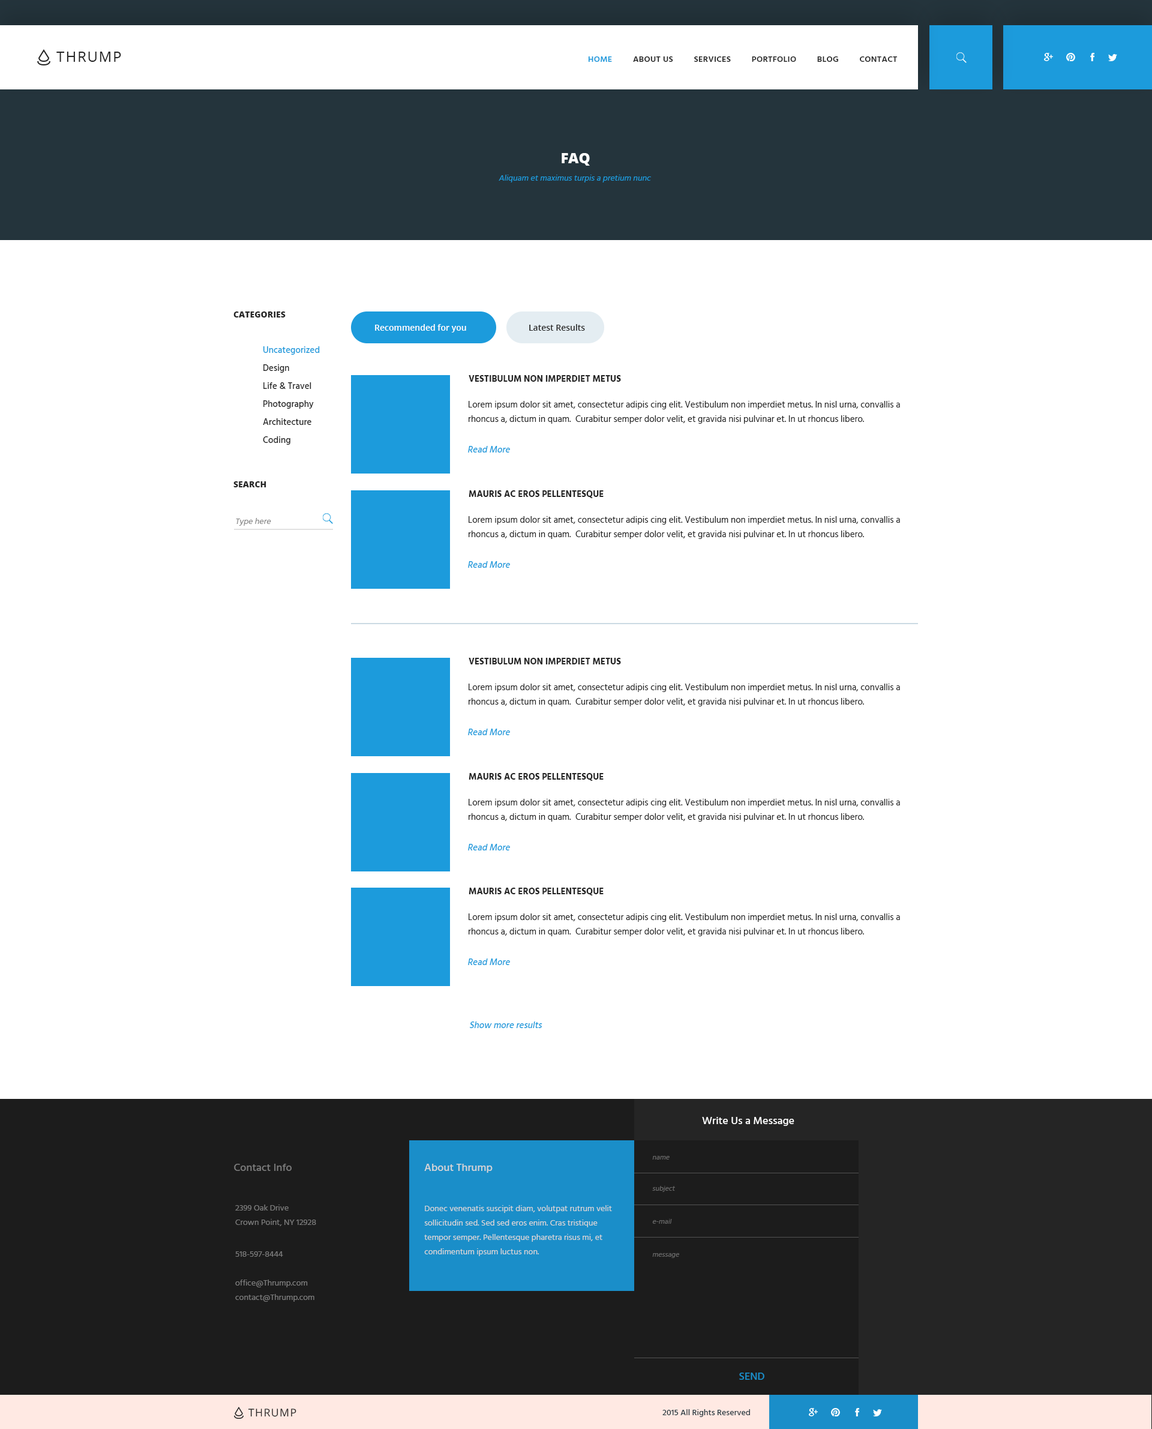
<style>
.page{position:relative;width:1152px;height:1429px;background:#ffffff}
.page>*{position:absolute;margin:0}
.t1{font:14.4px "OpenSans";letter-spacing:0.075em;color:#252525;text-transform:uppercase}
.t2{font:8.4px "Hind-Semibold";letter-spacing:0.025em;color:#252525;text-transform:uppercase}
.t3{font:8.4px "Hind-Semibold";letter-spacing:0.025em;color:#1c9bdc;text-transform:uppercase}
.t4{font:14.4px "OpenSans-Extrabold";color:#ffffff;text-transform:uppercase}
.t5{font:8.4px "Hind-Regular";color:#1c9bdc;font-style:italic}
.t6{font:8.4px "OpenSans-Extrabold";color:#252525;text-transform:uppercase}
.t7{font:8.4px "OpenSans-Semibold";color:#ffffff}
.t8{font:8.4px "OpenSans-Semibold";color:#252525}
.t9{font:9px/18px "Hind-Medium";color:#252525}
.t10{font:9px/18px "Hind-Medium";color:#1c9bdc}
.t11{font:9px "Hind-Bold";color:#252525;text-transform:uppercase}
.t12{font:9px/14.4px "Hind-Regular";color:#252525}
.t13{font:9px "Hind-Medium";color:#1c9bdc;font-style:italic}
.t14{font:8.4px "Hind-Regular";color:#868686;font-style:italic}
.t15{font:10.8px "Hind-Medium";color:#ffffff}
.t16{font:7.2px "Hind-Regular";color:#686868;font-style:italic}
.t17{font:10.8px "Hind-Medium";color:#7b7b7b}
.t18{font:10.8px "Hind-Medium";color:#d6d6d6}
.t19{font:8.4px/14.4px "Hind-Regular";color:#7b7b7b}
.t20{font:8.4px/14.4px "Hind-Regular";color:#d6d6d6}
.t21{font:8.4px "Hind-Regular";color:#7b7b7b}
.t22{font:10.8px "Hind-Medium";color:#1a8ec9}
.t23{font:10.7px "OpenSans";letter-spacing:0.075em;color:#252525;text-transform:uppercase}
.t24{font:8.4px "Hind-Medium";color:#273941}
</style>
<div class="page">
<p class="t1" style="left:56px;top:52px;width:65px;height:10px">Thrump</p>
<p class="t2" style="left:588px;top:56px;width:310px;height:6px"><span class="t3">Home</span>         About Us         Services         Portfolio         Blog         Contact</p>
<p class="t4" style="left:562px;top:153px;width:28px;height:13px">FAq</p>
<p class="t5" style="left:499px;top:175px;width:152px;height:7px">Aliquam et maximus turpis a pretium nunc</p>
<p class="t6" style="left:233px;top:311px;width:53px;height:6px">categories</p>
<p class="t7" style="left:375px;top:324px;width:91px;height:8px">Recommended for you</p>
<p class="t8" style="left:529px;top:324px;width:56px;height:7px">Latest Results</p>
<p class="t9" style="left:263px;top:346px;width:57px;height:99px"><span class="t10">Uncategorized<br></span>Design<br>Life &amp; Travel<br>Photography<br>Architecture<br>Coding</p>
<p class="t11" style="left:469px;top:375px;width:152px;height:7px">Vestibulum non imperdiet metus</p>
<p class="t12" style="left:469px;top:401px;width:431px;height:23px">Lorem ipsum dolor sit amet, consectetur adipis cing elit. Vestibulum non imperdiet metus. In nisl urna, convallis a rhoncus a, dictum in quam.  Curabitur semper dolor velit, et gravida nisi pulvinar et. In ut rhoncus libero.</p>
<p class="t13" style="left:468px;top:446px;width:42px;height:6px">Read More</p>
<p class="t6" style="left:233px;top:481px;width:33px;height:6px">search</p>
<p class="t11" style="left:469px;top:490px;width:135px;height:9px">Mauris ac eros pellentesque</p>
<p class="t14" style="left:236px;top:518px;width:35px;height:8px">Type here</p>
<p class="t12" style="left:469px;top:516px;width:431px;height:23px">Lorem ipsum dolor sit amet, consectetur adipis cing elit. Vestibulum non imperdiet metus. In nisl urna, convallis a rhoncus a, dictum in quam.  Curabitur semper dolor velit, et gravida nisi pulvinar et. In ut rhoncus libero.</p>
<p class="t13" style="left:468px;top:561px;width:42px;height:7px">Read More</p>
<p class="t11" style="left:469px;top:658px;width:152px;height:6px">Vestibulum non imperdiet metus</p>
<p class="t12" style="left:469px;top:683px;width:431px;height:23px">Lorem ipsum dolor sit amet, consectetur adipis cing elit. Vestibulum non imperdiet metus. In nisl urna, convallis a rhoncus a, dictum in quam.  Curabitur semper dolor velit, et gravida nisi pulvinar et. In ut rhoncus libero.</p>
<p class="t13" style="left:468px;top:728px;width:42px;height:7px">Read More</p>
<p class="t11" style="left:469px;top:773px;width:135px;height:8px">Mauris ac eros pellentesque</p>
<p class="t12" style="left:469px;top:799px;width:431px;height:22px">Lorem ipsum dolor sit amet, consectetur adipis cing elit. Vestibulum non imperdiet metus. In nisl urna, convallis a rhoncus a, dictum in quam.  Curabitur semper dolor velit, et gravida nisi pulvinar et. In ut rhoncus libero.</p>
<p class="t13" style="left:468px;top:844px;width:42px;height:6px">Read More</p>
<p class="t11" style="left:469px;top:887px;width:135px;height:9px">Mauris ac eros pellentesque</p>
<p class="t12" style="left:469px;top:913px;width:431px;height:23px">Lorem ipsum dolor sit amet, consectetur adipis cing elit. Vestibulum non imperdiet metus. In nisl urna, convallis a rhoncus a, dictum in quam.  Curabitur semper dolor velit, et gravida nisi pulvinar et. In ut rhoncus libero.</p>
<p class="t13" style="left:468px;top:958px;width:42px;height:7px">Read More</p>
<p class="t13" style="left:470px;top:1021px;width:72px;height:7px">Show more results</p>
<p class="t15" style="left:702px;top:1117px;width:92px;height:9px">Write Us a Message</p>
<p class="t16" style="left:652px;top:1156px;width:18px;height:3px">name</p>
<p class="t17" style="left:234px;top:1163px;width:58px;height:8px">Contact Info</p>
<p class="t18" style="left:424px;top:1163px;width:69px;height:9px">About Thrump</p>
<p class="t16" style="left:652px;top:1186px;width:23px;height:6px">subject</p>
<p class="t19" style="left:235px;top:1204px;width:81px;height:22px">2399 Oak Drive<br>Crown Point, NY 12928</p>
<p class="t20" style="left:424px;top:1205px;width:188px;height:51px">Donec venenatis suscipit diam, volutpat rutrum velit sollicitudin sed. Sed sed eros enim. Cras tristique tempor semper. Pellentesque pharetra risus mi, et condimentum ipsum luctus non.</p>
<p class="t16" style="left:652px;top:1219px;width:20px;height:4px">e-mail</p>
<p class="t21" style="left:235px;top:1251px;width:48px;height:5px">518-597-8444</p>
<p class="t16" style="left:652px;top:1253px;width:27px;height:5px">message</p>
<p class="t19" style="left:235px;top:1279px;width:79px;height:22px">office@Thrump.com<br>contact@Thrump.com</p>
<p class="t22" style="left:739px;top:1372px;width:25px;height:7px">SEND</p>
<p class="t23" style="left:248px;top:1408px;width:48px;height:9px">Thrump</p>
<p class="t24" style="left:662px;top:1409px;width:88px;height:8px">2015 All Rights Reserved</p>
</div>
